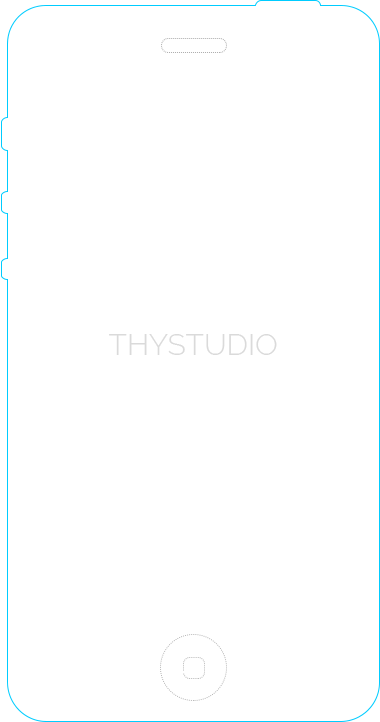
<style>
.page{position:relative;width:380px;height:722px;background:#ffffff}
.page>*{position:absolute;margin:0}
.t1{font:30px "Raleway-Light";color:#dadada}
</style>
<div class="page">
<p class="t1" style="left:109px;top:334px;width:168px;height:21px">THYSTUDIO</p>
</div>
